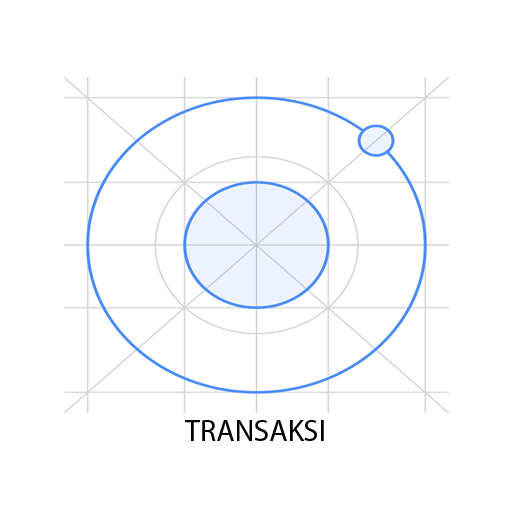
<style>
.page{position:relative;width:512px;height:512px;background:#ffffff}
.page>*{position:absolute;margin:0}
.t1{font:30px "MyriadPro-Regular";color:#000000}
</style>
<div class="page">
<p class="t1" style="left:185px;top:420px;width:139px;height:21px">TRANSAKSI</p>
</div>
